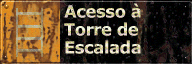
<style>
.page{position:relative;width:192px;height:64px}
.page>*{position:absolute;margin:0}
.t1{font:17px/18px "Verdana-Bold";letter-spacing:-0.03em}
</style>
<div class="page">
<p class="t1" style="left:64px;top:3px;width:77px;height:51px">Acesso à<br>Torre de<br>Escalada</p>
</div>
